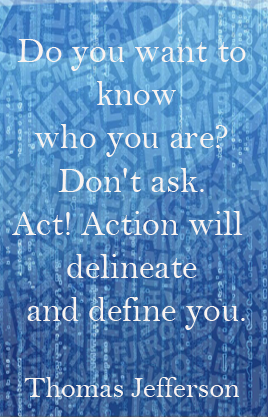
<style>
.page{position:relative;width:268px;height:417px}
.page>*{position:absolute;margin:0}
.t1{font:36px "BellMT";color:#f8f3f1}
.t2{font:30px "BellMT";color:#f8f3f1}
</style>
<div class="page">
<p class="t1" style="left:12px;top:39px;width:234px;height:358px;text-align:center">Do you want to<br> know<br>who you are?<br>Don't ask.<br>Act! Action will <br>delineate<br> and define you.<br><br><span class="t2">Thomas Jefferson</span></p>
</div>
